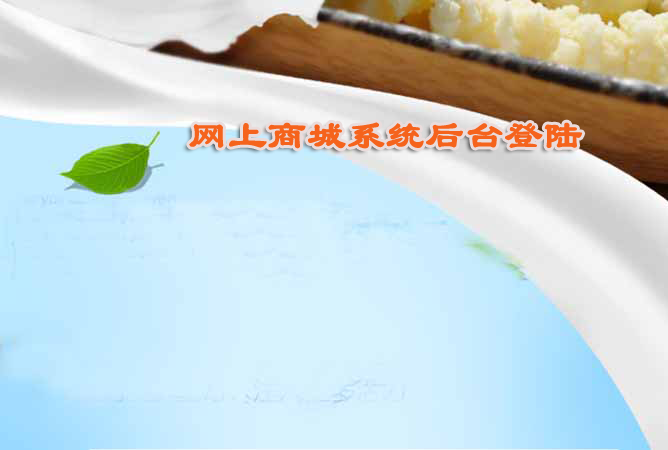
<style>
.page{position:relative;width:668px;height:450px}
.page>*{position:absolute;margin:0}
.t1{font:38.4px "LiSu";color:#f5631c;font-weight:bold}
</style>
<div class="page">
<p class="t1" style="left:189px;top:122px;width:394px;height:27px">网上商城系统后台登陆</p>
</div>
